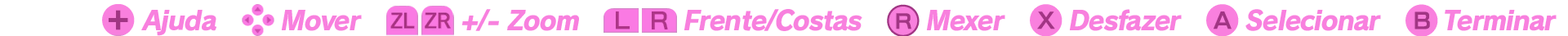
<style>
.page{position:relative;width:1568px;height:36px;background:#ffffff}
.page>*{position:absolute;margin:0}
.t1{font:26.1px "RodinPro-EB";letter-spacing:-0.046em;color:#f880de;font-style:italic}
</style>
<div class="page">
<p class="t1" style="left:141px;top:10px;width:75px;height:26px">Ajuda</p>
<p class="t1" style="left:281px;top:10px;width:81px;height:21px">Mover</p>
<p class="t1" style="left:461px;top:9px;width:118px;height:22px">+/- Zoom</p>
<p class="t1" style="left:684px;top:9px;width:178px;height:22px">Frente/Costas</p>
<p class="t1" style="left:926px;top:10px;width:79px;height:21px">Mexer</p>
<p class="t1" style="left:1069px;top:9px;width:113px;height:22px">Desfazer</p>
<p class="t1" style="left:1245px;top:9px;width:136px;height:22px">Selecionar</p>
<p class="t1" style="left:1445px;top:10px;width:112px;height:21px">Terminar</p>
</div>
